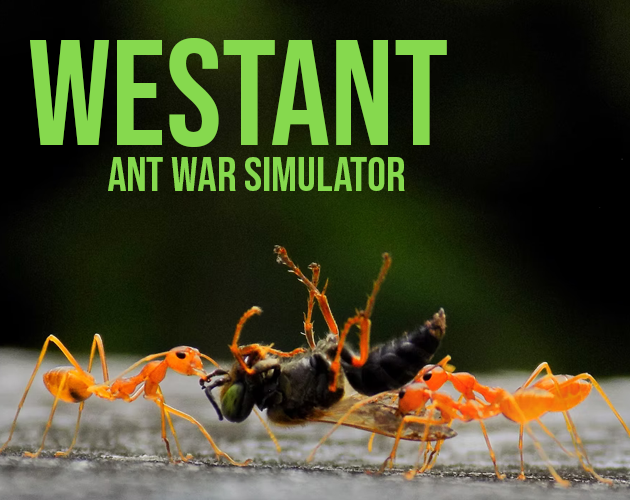
<style>
.page{position:relative;width:630px;height:500px}
.page>*{position:absolute;margin:0}
.t1{font:150px "BebasNeue-Regular";color:#86d94e}
.t2{font:48px "BebasNeue-Regular";color:#86d94e}
</style>
<div class="page">
<p class="t1" style="left:30px;top:38px;width:417px;height:109px">WESTANT</p>
<p class="t2" style="left:108px;top:157px;width:297px;height:34px">ant war simulator</p>
</div>
